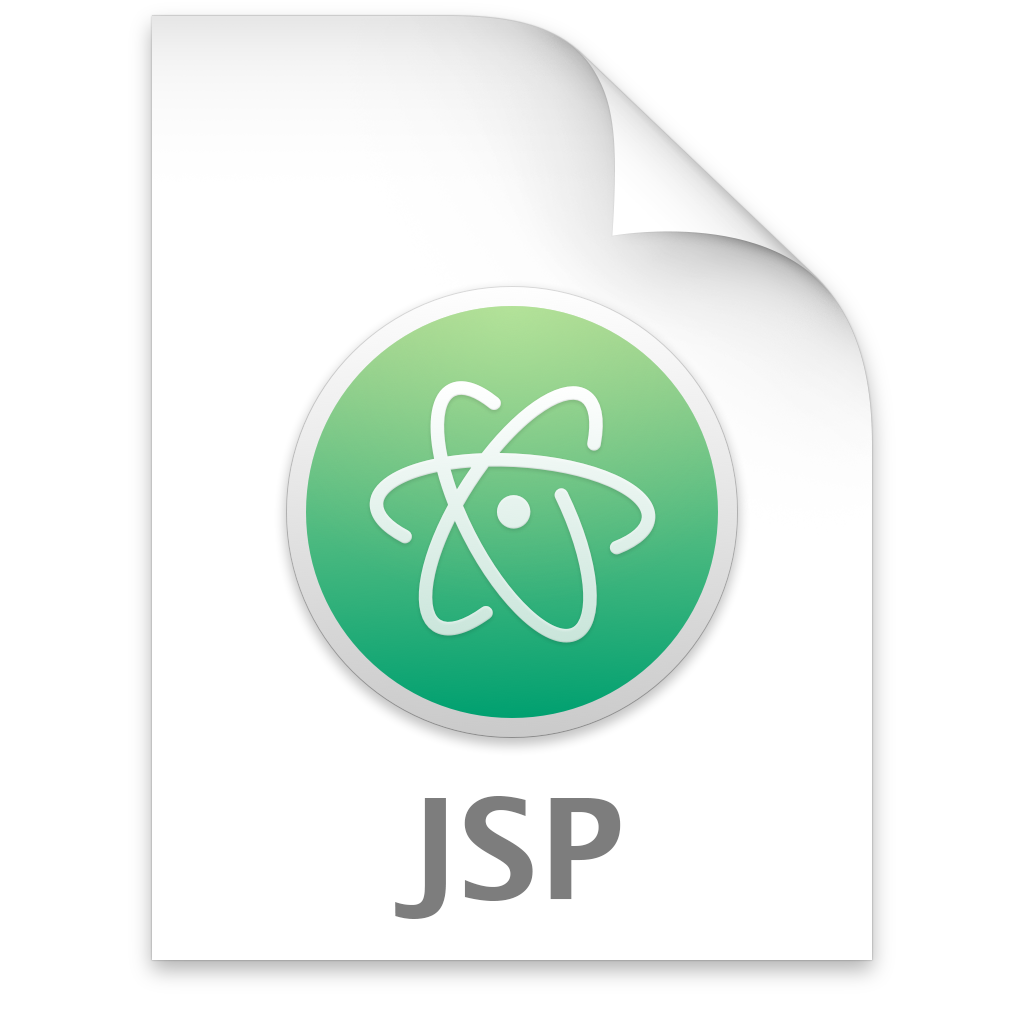
<style>
.page{position:relative;width:1024px;height:1024px;background:#ffffff}
.page>*{position:absolute;margin:0}
.t1{font:140px "LucidaGrande-Bold";color:#7d7d7d}
</style>
<div class="page">
<p class="t1" style="left:395px;top:796px;width:226px;height:123px">JSP</p>
</div>
